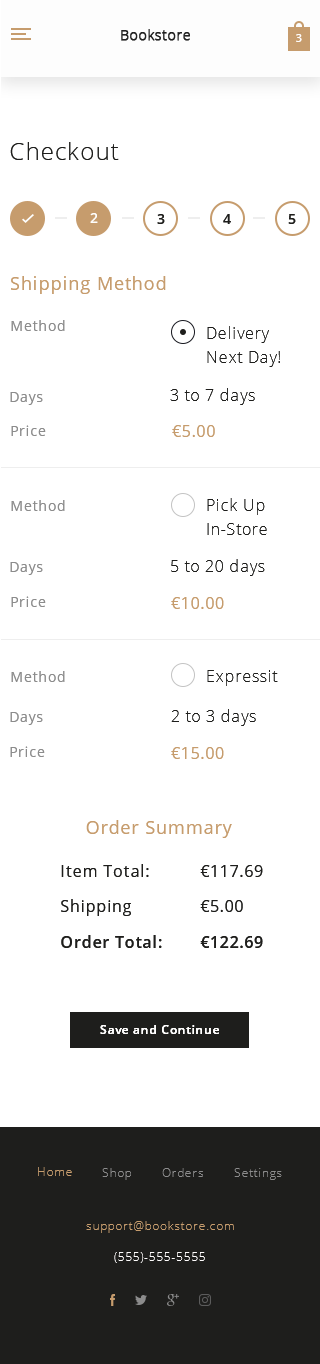
<style>
.page{position:relative;width:320px;height:1364px;background:#ffffff}
.page>*{position:absolute;margin:0}
.t1{font:24px "OpenSans-Light";letter-spacing:0.05em;color:#1e1e1c}
.t2{font:14px "OpenSans-Semibold";letter-spacing:0.05em;color:#fefefd}
.t3{font:14px "OpenSans-Semibold";letter-spacing:0.05em;color:#1e1e1c}
.t4{font:18px "OpenSans";letter-spacing:0.05em;color:#c69c6d}
.t5{font:14px "OpenSans";letter-spacing:0.05em;color:#8c8c8c}
.t6{font:16px/24px "OpenSans-Light";letter-spacing:0.05em;color:#1e1e1c}
.t7{font:16px "OpenSans-Light";letter-spacing:0.05em;color:#1e1e1c}
.t8{font:16px "OpenSans";letter-spacing:0.05em;color:#c69c6d}
.t9{font:16px "OpenSans";letter-spacing:0.05em;color:#1e1e1c}
.t10{font:16px "OpenSans-Semibold";letter-spacing:0.05em;color:#1e1e1c}
.t11{font:12px "OpenSans-Semibold";letter-spacing:0.05em;color:#fffefe}
</style>
<div class="page">
<p class="t1" style="left:10px;top:142px;width:109px;height:18px">Checkout</p>
<p class="t2" style="left:90px;top:213px;width:8px;height:10px">2</p>
<p class="t3" style="left:157px;top:214px;width:8px;height:10px">3</p>
<p class="t3" style="left:223px;top:214px;width:8px;height:10px">4</p>
<p class="t3" style="left:288px;top:214px;width:8px;height:10px">5</p>
<p class="t4" style="left:11px;top:276px;width:155px;height:18px">Shipping Method</p>
<p class="t5" style="left:11px;top:320px;width:54px;height:11px">Method</p>
<p class="t6" style="left:207px;top:326px;width:73px;height:41px">Delivery<br>Next Day!</p>
<p class="t7" style="left:170px;top:388px;width:85px;height:17px">3 to 7 days</p>
<p class="t5" style="left:10px;top:392px;width:33px;height:13px">Days</p>
<p class="t5" style="left:11px;top:425px;width:35px;height:11px">Price</p>
<p class="t8" style="left:172px;top:425px;width:43px;height:12px">€5.00</p>
<p class="t5" style="left:11px;top:500px;width:54px;height:11px">Method</p>
<p class="t6" style="left:207px;top:498px;width:60px;height:37px">Pick Up In-Store</p>
<p class="t5" style="left:10px;top:562px;width:33px;height:13px">Days</p>
<p class="t7" style="left:171px;top:559px;width:94px;height:17px">5 to 20 days</p>
<p class="t5" style="left:11px;top:596px;width:35px;height:11px">Price</p>
<p class="t8" style="left:171px;top:597px;width:53px;height:12px">€10.00</p>
<p class="t5" style="left:11px;top:671px;width:54px;height:11px">Method</p>
<p class="t7" style="left:207px;top:670px;width:71px;height:16px">Expressit</p>
<p class="t5" style="left:10px;top:712px;width:33px;height:13px">Days</p>
<p class="t7" style="left:171px;top:709px;width:85px;height:17px">2 to 3 days</p>
<p class="t5" style="left:10px;top:746px;width:35px;height:11px">Price</p>
<p class="t8" style="left:171px;top:747px;width:53px;height:12px">€15.00</p>
<p class="t4" style="left:86px;top:820px;width:146px;height:18px">Order Summary</p>
<p class="t9" style="left:61px;top:864px;width:88px;height:13px">Item Total:</p>
<p class="t9" style="left:200px;top:865px;width:63px;height:12px">€117.69</p>
<p class="t9" style="left:61px;top:899px;width:70px;height:17px">Shipping</p>
<p class="t9" style="left:200px;top:900px;width:43px;height:12px">€5.00</p>
<p class="t10" style="left:61px;top:935px;width:101px;height:13px">Order Total:</p>
<p class="t10" style="left:200px;top:936px;width:63px;height:12px">€122.69</p>
<p class="t11" style="left:100px;top:1025px;width:119px;height:9px">Save and Continue</p>
<p class="t11" style="left:100px;top:1025px;width:119px;height:9px">Save and Continue</p>
</div>
